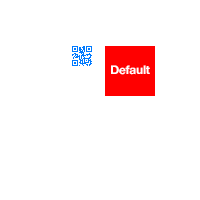
<style>
.page{position:relative;width:200px;height:200px;background:#ffffff}
.page>*{position:absolute;margin:0}
.t1{font:12px "HelveticaNeue-Bold";letter-spacing:-0.02em;color:#ffffff}
</style>
<div class="page">
<p class="t1" style="left:111px;top:65px;width:39px;height:10px">Default</p>
</div>
